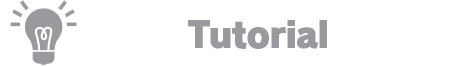
<style>
.page{position:relative;width:464px;height:66px;background:#ffffff}
.page>*{position:absolute;margin:0}
.t1{font:36px "RodinPro-UB";letter-spacing:-0.039em;color:#989a9d}
</style>
<div class="page">
<p class="t1" style="left:188px;top:20px;width:139px;height:29px">Tutorial</p>
</div>
